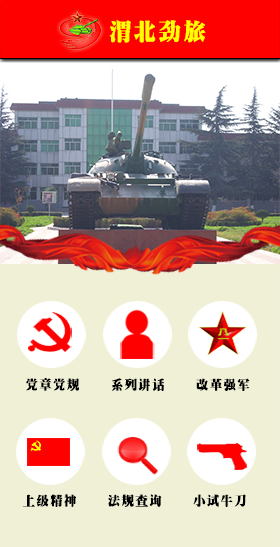
<style>
.page{position:relative;width:280px;height:547px;background:#f0f0d6}
.page>*{position:absolute;margin:0}
.t1{font:25px "RS_CuBiao";letter-spacing:0.05em;color:#ffff00;scale:0.94 1}
.t2{font:13.9px "RS_CuBiao";letter-spacing:0.05em;color:#000000;scale:0.94 1}
</style>
<div class="page">
<p class="t1" style="left:109px;top:20px;width:97px;height:23px">渭北劲旅</p>
<p class="t2" style="left:26px;top:378px;width:53px;height:13px">党章党规</p>
<p class="t2" style="left:112px;top:378px;width:52px;height:13px">系列讲话</p>
<p class="t2" style="left:196px;top:378px;width:54px;height:13px">改革强军</p>
<p class="t2" style="left:22px;top:494px;width:54px;height:13px">上级精神</p>
<p class="t2" style="left:108px;top:494px;width:54px;height:13px">法规查询</p>
<p class="t2" style="left:193px;top:494px;width:53px;height:13px">小试牛刀</p>
</div>
